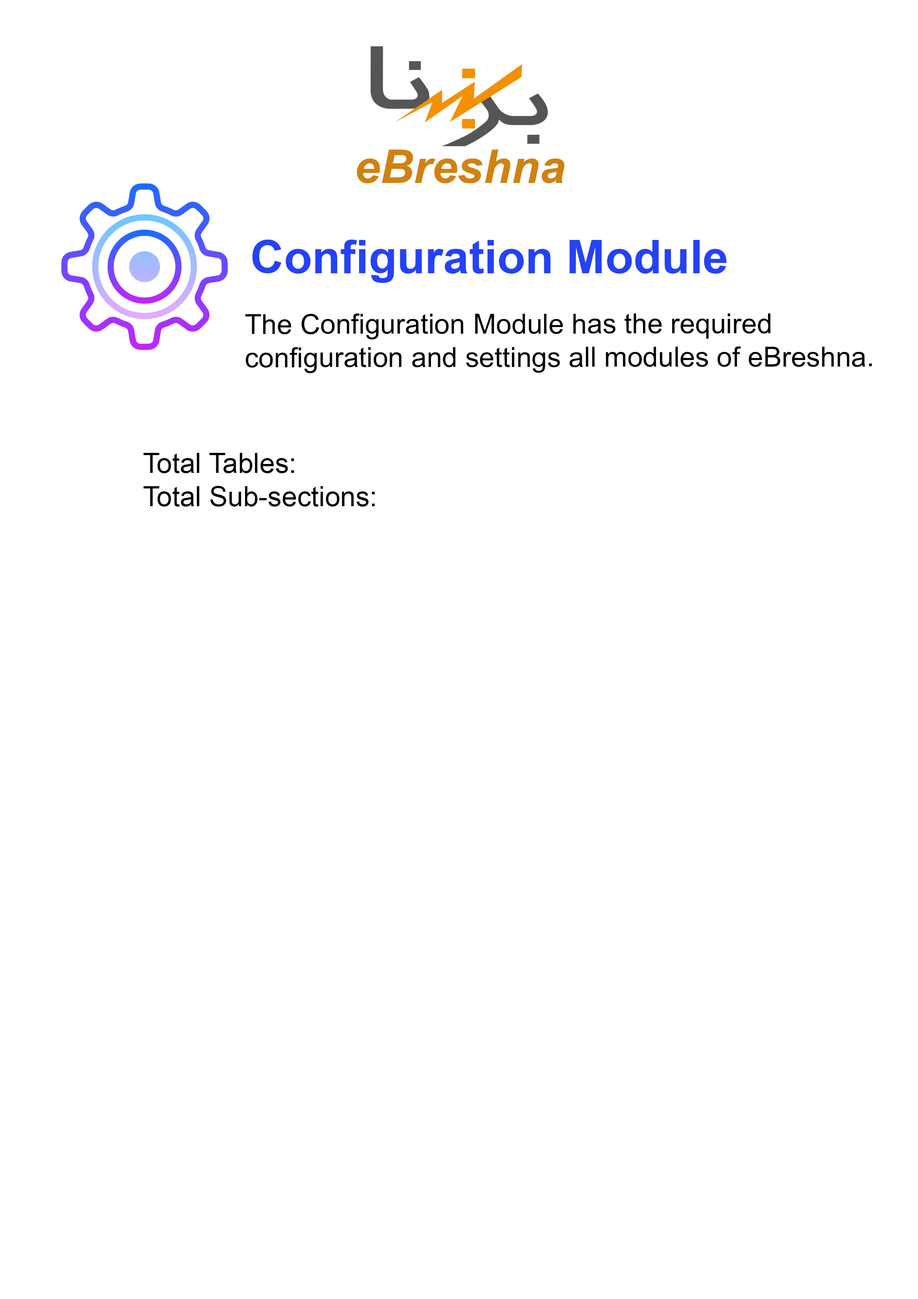
<style>
.page{position:relative;width:918px;height:1299px;background:#ffffff}
.page>*{position:absolute;margin:0}
.t1{font:46.3px "Arial-BoldItalicMT";color:#d18110}
.t2{font:46.3px "Arial-BoldMT";color:#2442f7}
.t3{font:27.8px "ArialMT";color:#000000}
</style>
<div class="page">
<p class="t1" style="left:357px;top:150px;width:208px;height:33px">eBreshna</p>
<p class="t2" style="left:252px;top:240px;width:475px;height:43px">Configuration Module</p>
<p class="t3" style="left:245px;top:313px;width:627px;height:60px">The Configuration Module has the required <br>configuration and settings all modules of eBreshna.</p>
<p class="t3" style="left:143px;top:453px;width:232px;height:53px">Total Tables: <br>Total Sub-sections:</p>
</div>
